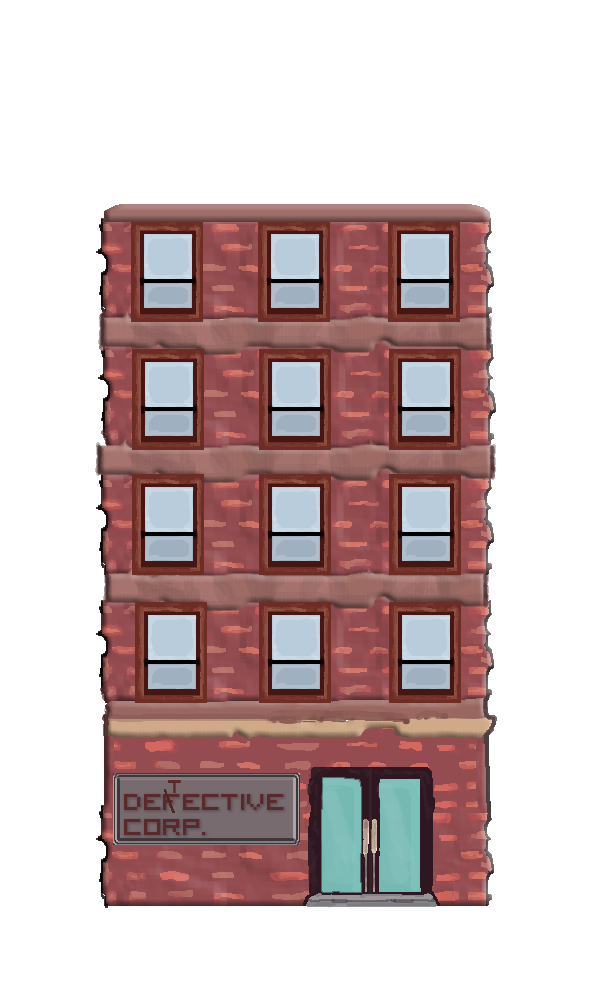
<style>
.page{position:relative;width:600px;height:1000px;background:#ffffff}
.page>*{position:absolute;margin:0}
.t1{font:33.3px "VisitorTT2BRK";color:#5c292b}
.t2{font:41.7px/25px "VisitorTT2BRK";color:#5c292b}
</style>
<div class="page">
<p class="t1" style="left:168px;top:780px;width:13px;height:13px">T</p>
<p class="t2" style="left:124px;top:794px;width:160px;height:41px">defective<br>Corp.</p>
</div>
